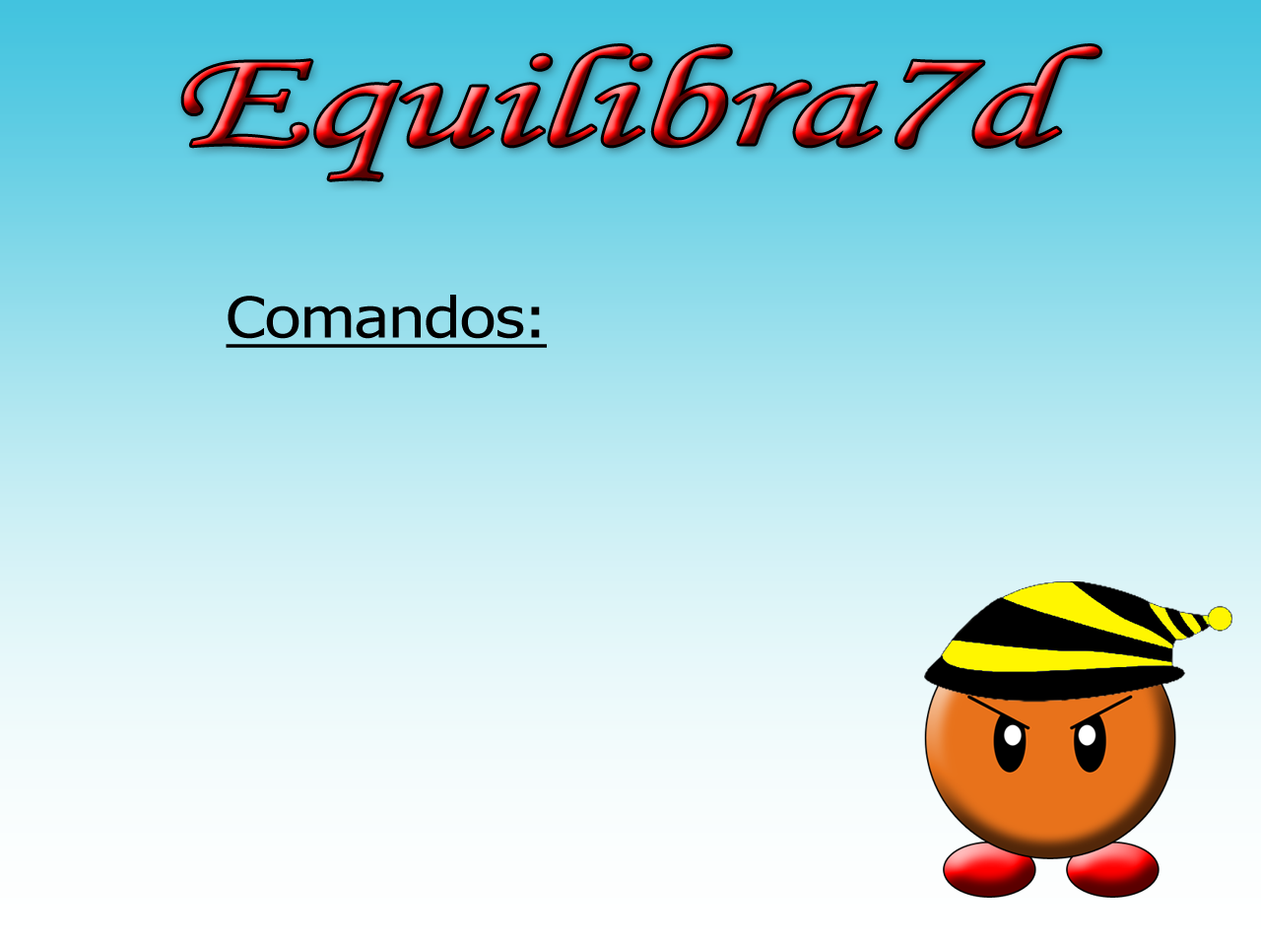
<style>
.page{position:relative;width:1261px;height:946px}
.page>*{position:absolute;margin:0}
.t1{font:140.6px "MonotypeCorsiva";letter-spacing:0.005em;scale:1.5 1}
.t2{font:56.2px "Tahoma";letter-spacing:0.005em;color:#000000;text-decoration:underline;scale:1.16 1}
</style>
<div class="page">
<p class="t1" style="left:183px;top:46px;width:916px;height:133px">Equilibra7d</p>
<p class="t2" style="left:226px;top:295px;width:321px;height:53px">Comandos:</p>
</div>
